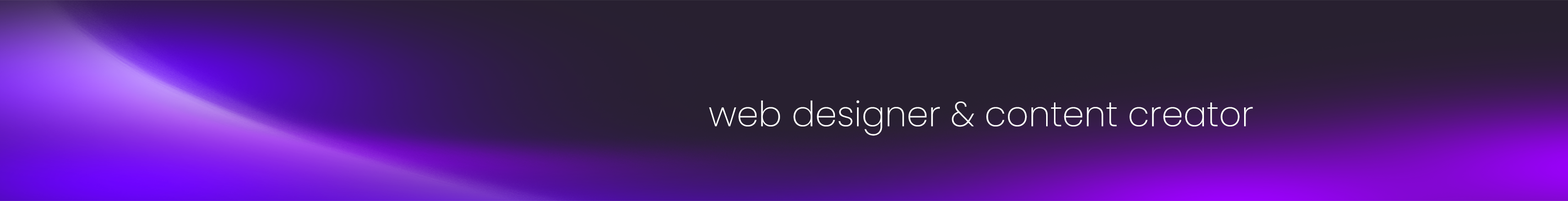
<style>
.page{position:relative;width:1568px;height:201px}
.page>*{position:absolute;margin:0}
.t1{font:34.8px "Poppins-ExtraLight";color:#ffffff}
</style>
<div class="page">
<p class="t1" style="left:709px;top:100px;width:544px;height:36px">web designer &amp; content creator</p>
</div>
